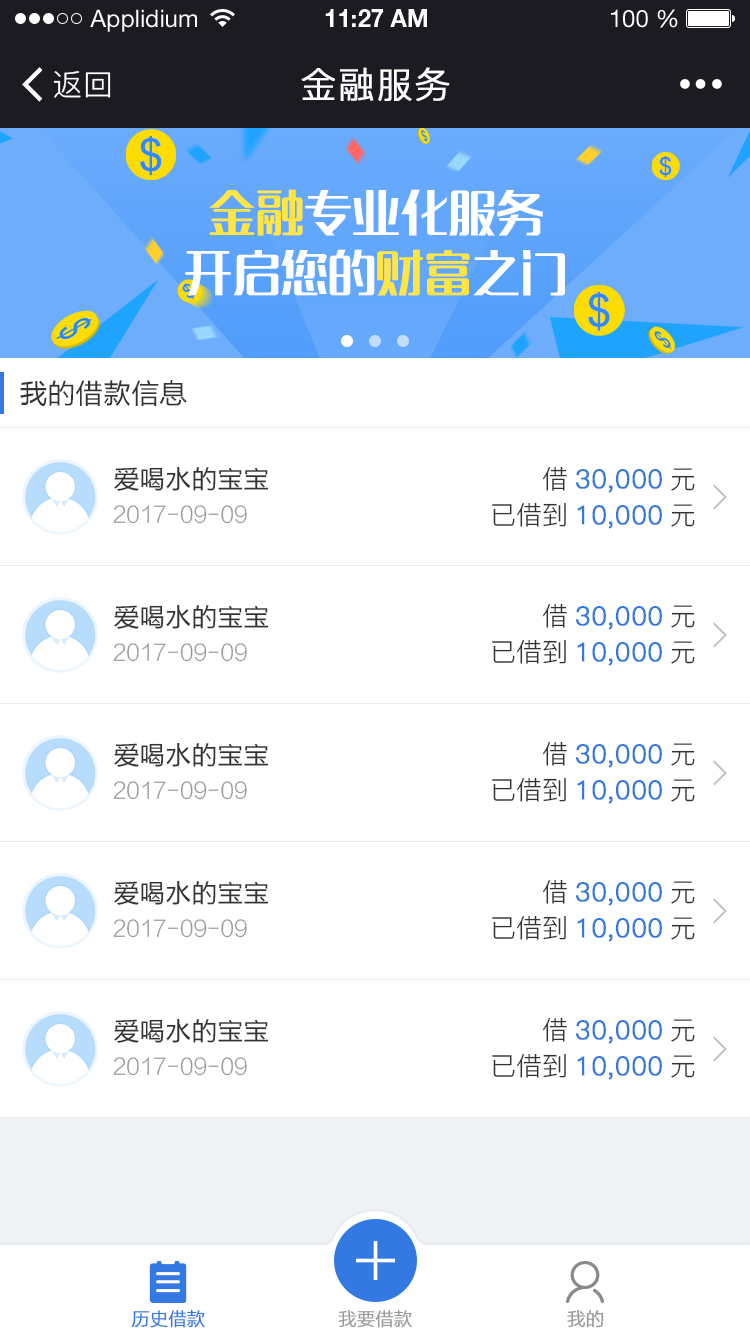
<style>
.page{position:relative;width:750px;height:1334px;background:#ffffff}
.page>*{position:absolute;margin:0}
.t1{font:24px "HelveticaNeueLTStd-Roman";color:#ffffff}
.t2{font:24px "HelveticaNeueLTStd-Bd";color:#ffffff}
.t3{font:30px "PingFang-SC-Regular";letter-spacing:0.025em;color:#ffffff}
.t4{font:36px "PingFang-SC-Regular";letter-spacing:0.025em;color:#ffffff;font-weight:bold}
.t5{font:48px/60px "MFLangQian_Noncommercial-Regular";color:#ffffff}
.t6{font:48px/60px "MFLangQian_Noncommercial-Regular";color:#ffe643}
.t7{font:28px "FZLTH_YS_GBK";color:#333333}
.t8{font:26px "FZLTH_YS_GBK";color:#333333}
.t9{font:26px "PingFang-SC-Regular";color:#3479e1;font-weight:bold}
.t10{font:26px "PingFang-SC-Regular";color:#333333}
.t11{font:22px "FZLTXHK--GBK1-0";color:#999999}
.t12{font:18px "FZLTXHK--GBK1-0";color:#3479e1;font-weight:bold}
.t13{font:18px "FZLTXHK--GBK1-0";color:#999999;font-weight:bold}
</style>
<div class="page">
<p class="t1" style="left:90px;top:9px;width:107px;height:23px">Applidium</p>
<p class="t2" style="left:325px;top:9px;width:102px;height:18px">11:27 AM</p>
<p class="t1" style="left:611px;top:9px;width:67px;height:19px">100 %</p>
<p class="t3" style="left:53px;top:71px;width:58px;height:27px">返回</p>
<p class="t4" style="left:301px;top:67px;width:149px;height:34px">金融服务</p>
<p class="t5" style="left:185px;top:189px;width:380px;height:107px;text-align:center"><span class="t6">金融</span>专业化服务<br>开启您的<span class="t6">财富</span>之门</p>
<p class="t7" style="left:20px;top:380px;width:167px;height:26px">我的借款信息</p>
<p class="t8" style="left:114px;top:466px;width:155px;height:25px">爱喝水的宝宝</p>
<p class="t9" style="left:543px;top:466px;width:152px;height:27px"><span class="t10">借</span>30,000<span class="t10">元</span></p>
<p class="t11" style="left:113px;top:505px;width:134px;height:19px">2017-09-09</p>
<p class="t9" style="left:492px;top:502px;width:203px;height:27px"><span class="t10">已借到</span>10,000<span class="t10">元</span></p>
<p class="t8" style="left:114px;top:604px;width:155px;height:25px">爱喝水的宝宝</p>
<p class="t9" style="left:543px;top:603px;width:152px;height:27px"><span class="t10">借</span>30,000<span class="t10">元</span></p>
<p class="t9" style="left:492px;top:639px;width:203px;height:27px"><span class="t10">已借到</span>10,000<span class="t10">元</span></p>
<p class="t11" style="left:113px;top:643px;width:134px;height:19px">2017-09-09</p>
<p class="t8" style="left:114px;top:742px;width:155px;height:25px">爱喝水的宝宝</p>
<p class="t9" style="left:543px;top:741px;width:152px;height:27px"><span class="t10">借</span>30,000<span class="t10">元</span></p>
<p class="t11" style="left:113px;top:781px;width:134px;height:19px">2017-09-09</p>
<p class="t9" style="left:492px;top:777px;width:203px;height:27px"><span class="t10">已借到</span>10,000<span class="t10">元</span></p>
<p class="t8" style="left:114px;top:880px;width:155px;height:25px">爱喝水的宝宝</p>
<p class="t9" style="left:543px;top:879px;width:152px;height:27px"><span class="t10">借</span>30,000<span class="t10">元</span></p>
<p class="t9" style="left:492px;top:915px;width:203px;height:27px"><span class="t10">已借到</span>10,000<span class="t10">元</span></p>
<p class="t11" style="left:113px;top:919px;width:134px;height:19px">2017-09-09</p>
<p class="t8" style="left:114px;top:1018px;width:155px;height:25px">爱喝水的宝宝</p>
<p class="t9" style="left:543px;top:1017px;width:152px;height:27px"><span class="t10">借</span>30,000<span class="t10">元</span></p>
<p class="t11" style="left:113px;top:1057px;width:134px;height:19px">2017-09-09</p>
<p class="t9" style="left:492px;top:1053px;width:203px;height:27px"><span class="t10">已借到</span>10,000<span class="t10">元</span></p>
<p class="t12" style="left:131px;top:1309px;width:74px;height:19px">历史借款</p>
<p class="t13" style="left:338px;top:1309px;width:74px;height:19px">我要借款</p>
<p class="t13" style="left:567px;top:1309px;width:37px;height:19px">我的</p>
</div>
